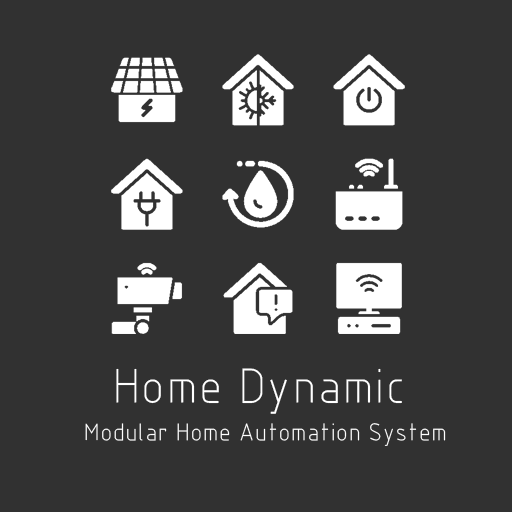
<style>
.page{position:relative;width:512px;height:512px;background:#313131}
.page>*{position:absolute;margin:0}
.t1{font:50px "ISOCP_IV25";color:#ffffff}
.t2{font:25px "ISOCP_IV25";color:#ffffff}
</style>
<div class="page">
<p class="t1" style="left:116px;top:368px;width:286px;height:46px">Home Dynamic</p>
<p class="t2" style="left:85px;top:423px;width:361px;height:23px">Modular Home Automation System</p>
</div>
